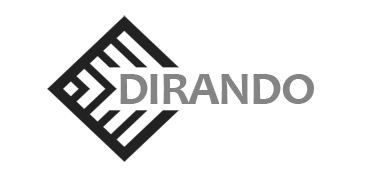
<style>
.page{position:relative;width:368px;height:179px;background:#ffffff}
.page>*{position:absolute;margin:0}
.t1{font:46.9px "Candara-Bold";letter-spacing:-0.025em;color:#848484;scale:1.06 1}
</style>
<div class="page">
<p class="t1" style="left:120px;top:74px;width:194px;height:30px">DIRANDO</p>
</div>
